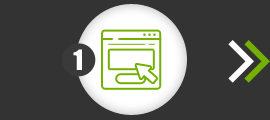
<style>
.page{position:relative;width:270px;height:120px;background:#333333}
.page>*{position:absolute;margin:0}
.t1{font:25.6px "Impact";color:#ffffff}
</style>
<div class="page">
<p class="t1" style="left:73px;top:49px;width:9px;height:21px">1</p>
</div>
